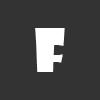
<style>
.page{position:relative;width:100px;height:100px;background:#333333}
.page>*{position:absolute;margin:0}
.t1{font:58.3px "ShowcardGothic-Reg";color:#ffffff}
</style>
<div class="page">
<p class="t1" style="left:35px;top:28px;width:30px;height:44px">f</p>
</div>
